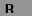
<style>
.page{position:relative;width:32px;height:16px;background:#959595}
.page>*{position:absolute;margin:0}
.t1{font:10.5px "FolkPro-Heavy";color:#000000;scale:1.07 1}
</style>
<div class="page">
<p class="t1" style="left:5px;top:4px;width:9px;height:9px">R</p>
</div>
